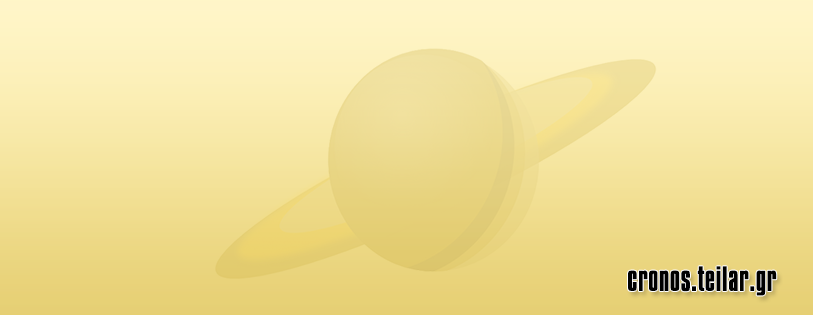
<style>
.page{position:relative;width:813px;height:315px}
.page>*{position:absolute;margin:0}
.t1{font:30px "Aka-AcidGR-Compacta";color:#000000;font-weight:bold}
</style>
<div class="page">
<p class="t1" style="left:628px;top:266px;width:149px;height:30px">cronos.teilar.gr</p>
</div>
